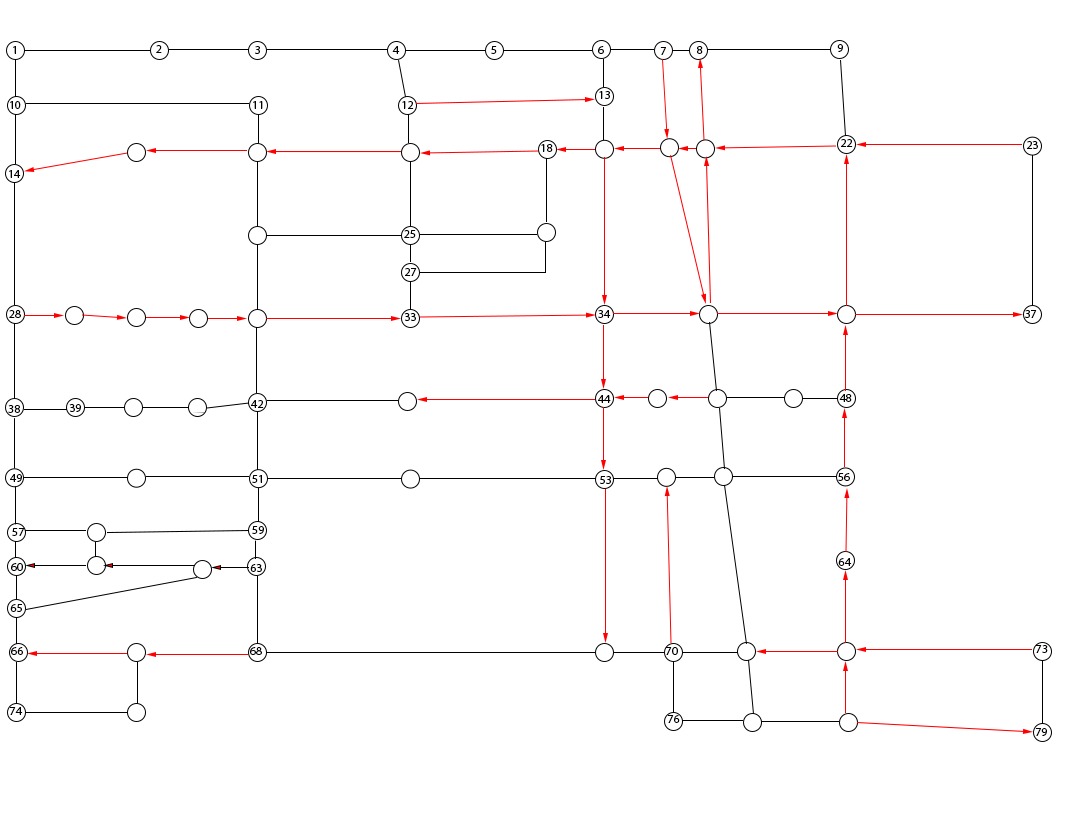
<style>
.page{position:relative;width:1072px;height:815px;background:#ffffff}
.page>*{position:absolute;margin:0}
.t1{font:12px "MyriadPro-Regular";color:#000000}
</style>
<div class="page">
<p class="t1" style="left:13px;top:46px;width:3px;height:8px">1</p>
<p class="t1" style="left:156px;top:45px;width:6px;height:8px">2</p>
<p class="t1" style="left:255px;top:46px;width:5px;height:8px">3</p>
<p class="t1" style="left:392px;top:46px;width:8px;height:8px">4</p>
<p class="t1" style="left:491px;top:46px;width:6px;height:8px">5</p>
<p class="t1" style="left:598px;top:46px;width:6px;height:8px">6</p>
<p class="t1" style="left:660px;top:47px;width:6px;height:8px">7</p>
<p class="t1" style="left:697px;top:46px;width:6px;height:8px">8</p>
<p class="t1" style="left:837px;top:44px;width:6px;height:8px">9</p>
<p class="t1" style="left:10px;top:101px;width:11px;height:8px">10</p>
<p class="t1" style="left:253px;top:101px;width:10px;height:8px">11</p>
<p class="t1" style="left:402px;top:101px;width:12px;height:8px">12</p>
<p class="t1" style="left:599px;top:91px;width:11px;height:8px">13</p>
<p class="t1" style="left:541px;top:144px;width:12px;height:8px">18</p>
<p class="t1" style="left:841px;top:139px;width:12px;height:8px">22</p>
<p class="t1" style="left:1027px;top:141px;width:11px;height:8px">23</p>
<p class="t1" style="left:9px;top:170px;width:12px;height:8px">14</p>
<p class="t1" style="left:404px;top:230px;width:12px;height:8px">25</p>
<p class="t1" style="left:405px;top:268px;width:12px;height:8px">27</p>
<p class="t1" style="left:9px;top:310px;width:12px;height:8px">28</p>
<p class="t1" style="left:404px;top:313px;width:12px;height:8px">33</p>
<p class="t1" style="left:598px;top:310px;width:13px;height:8px">34</p>
<p class="t1" style="left:1025px;top:310px;width:12px;height:8px">37</p>
<p class="t1" style="left:251px;top:400px;width:13px;height:8px">42</p>
<p class="t1" style="left:598px;top:395px;width:13px;height:8px">44</p>
<p class="t1" style="left:839px;top:394px;width:13px;height:8px">48</p>
<p class="t1" style="left:8px;top:405px;width:12px;height:8px">38</p>
<p class="t1" style="left:69px;top:404px;width:12px;height:8px">39</p>
<p class="t1" style="left:838px;top:473px;width:12px;height:8px">56</p>
<p class="t1" style="left:10px;top:474px;width:12px;height:8px">49</p>
<p class="t1" style="left:252px;top:475px;width:10px;height:8px">51</p>
<p class="t1" style="left:600px;top:476px;width:11px;height:8px">53</p>
<p class="t1" style="left:12px;top:528px;width:12px;height:8px">57</p>
<p class="t1" style="left:252px;top:526px;width:12px;height:8px">59</p>
<p class="t1" style="left:838px;top:558px;width:14px;height:8px">64</p>
<p class="t1" style="left:11px;top:563px;width:12px;height:8px">60</p>
<p class="t1" style="left:250px;top:564px;width:12px;height:8px">63</p>
<p class="t1" style="left:10px;top:604px;width:12px;height:8px">65</p>
<p class="t1" style="left:11px;top:647px;width:12px;height:8px">66</p>
<p class="t1" style="left:250px;top:647px;width:12px;height:8px">68</p>
<p class="t1" style="left:666px;top:647px;width:12px;height:8px">70</p>
<p class="t1" style="left:1036px;top:645px;width:12px;height:8px">73</p>
<p class="t1" style="left:10px;top:707px;width:13px;height:8px">74</p>
<p class="t1" style="left:668px;top:715px;width:12px;height:8px">76</p>
<p class="t1" style="left:1035px;top:728px;width:12px;height:8px">79</p>
</div>
